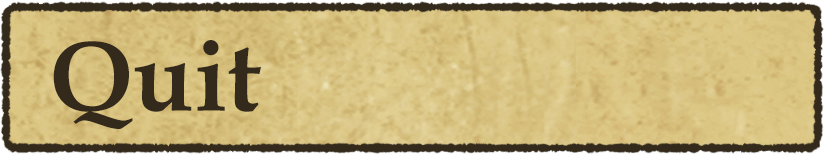
<style>
.page{position:relative;width:824px;height:155px}
.page>*{position:absolute;margin:0}
.t1{font:100px "BookAntiqua-Bold";color:#332a1c}
</style>
<div class="page">
<p class="t1" style="left:53px;top:40px;width:208px;height:89px">Quit</p>
</div>
